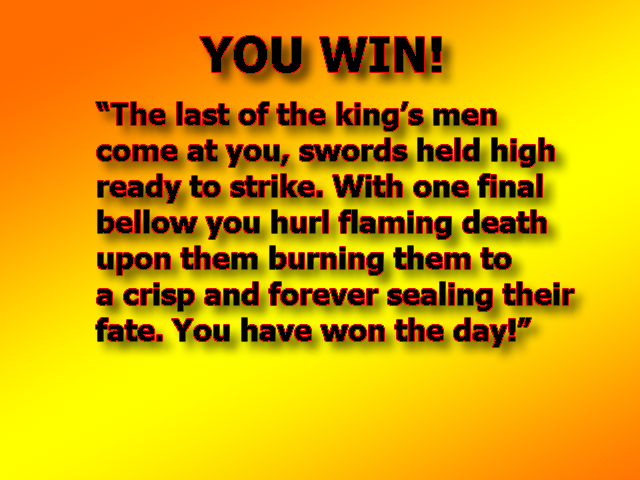
<style>
.page{position:relative;width:640px;height:480px}
.page>*{position:absolute;margin:0}
.t1{font:48px "Tahoma-Bold";color:#000000}
.t2{font:30px "Tahoma-Bold";color:#000000}
</style>
<div class="page">
<p class="t1" style="left:200px;top:36px;width:241px;height:37px">YOU WIN!</p>
<p class="t2" style="left:96px;top:102px;width:478px;height:245px">“The last of the king’s men<br>come at you, swords held high<br>ready to strike. With one final<br>bellow you hurl flaming death<br>upon them burning them to<br>a crisp and forever sealing their<br>fate. You have won the day!”</p>
</div>
